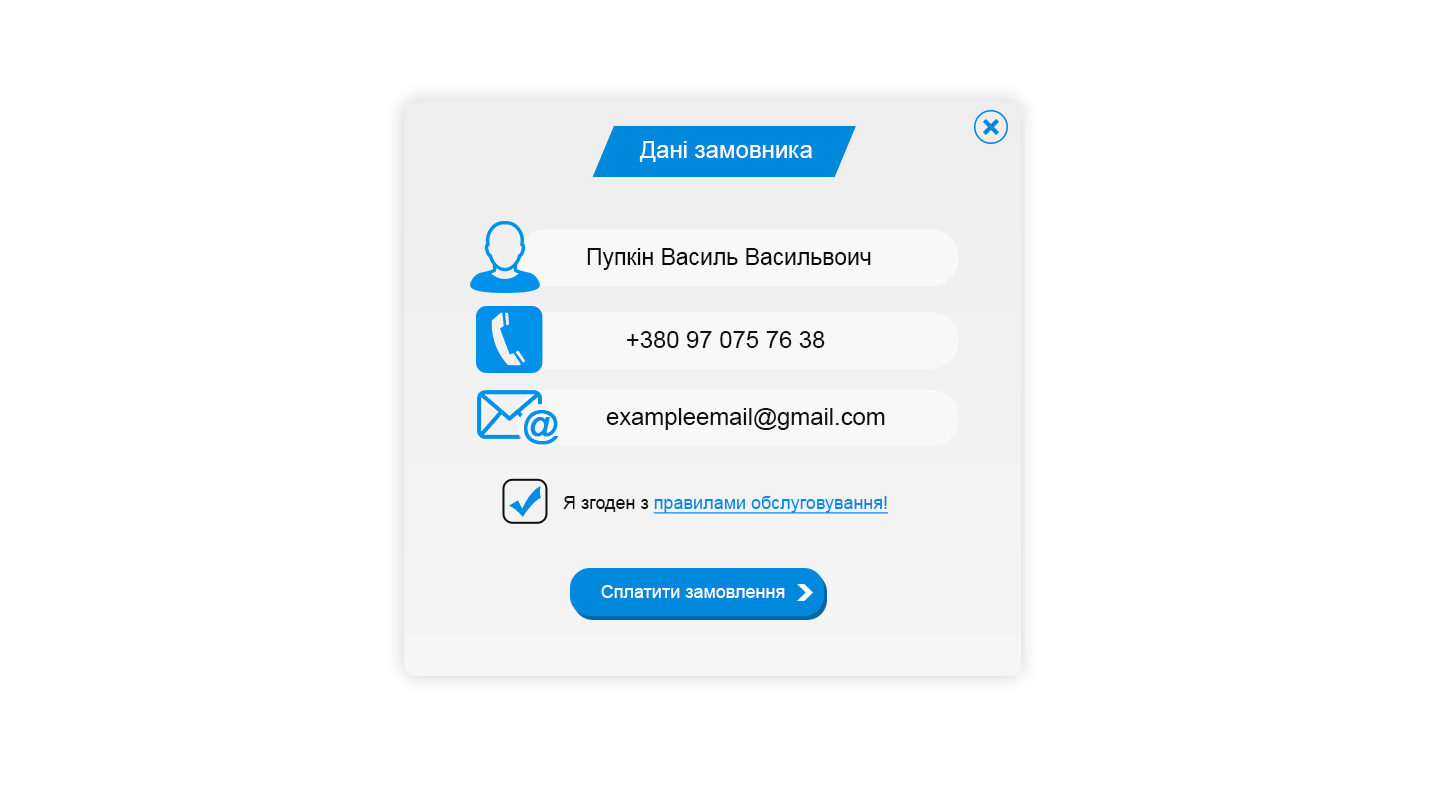
<style>
.page{position:relative;width:1440px;height:800px;background:#ffffff}
.page>*{position:absolute;margin:0}
.t1{font:24px "ArialMT";color:#ffffff}
.t2{font:22.9px "ArialMT";color:#0b0b0b}
.t3{font:24.1px "ArialMT";color:#101010}
.t4{font:36px "ArialMT";color:#0091ea;font-weight:bold}
.t5{font:18px "ArialMT";color:#008be1;text-decoration:underline}
.t6{font:18px "ArialMT";color:#101010}
.t7{font:18px "ArialMT";color:#ffffff}
</style>
<div class="page">
<p class="t1" style="left:639px;top:141px;width:173px;height:21px">Дані замовника</p>
<p class="t2" style="left:587px;top:248px;width:284px;height:22px">Пупкін Василь Васильвоич</p>
<p class="t3" style="left:627px;top:331px;width:198px;height:17px">+380 97 075 76 38</p>
<p class="t4" style="left:524px;top:410px;width:35px;height:35px">@</p>
<p class="t3" style="left:606px;top:408px;width:279px;height:22px">exampleemail@gmail.com</p>
<p class="t5" style="left:563px;top:496px;width:326px;height:18px"><span class="t6">Я згоден з </span>правилами обслуговування!</p>
<p class="t7" style="left:601px;top:585px;width:184px;height:13px">Сплатити замовлення</p>
</div>
